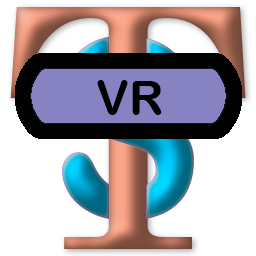
<style>
.page{position:relative;width:256px;height:256px;background:#ffffff}
.page>*{position:absolute;margin:0}
.t1{font:48px "ArialRoundedMTBold";color:#000000}
</style>
<div class="page">
<p class="t1" style="left:97px;top:80px;width:65px;height:35px">VR</p>
</div>
